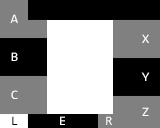
<style>
.page{position:relative;width:160px;height:128px;background:#000000}
.page>*{position:absolute;margin:0}
.t1{font:13px "Consolas";color:#ffffff;scale:1.05 1}
.t2{font:13px "Consolas";color:#000000;scale:1.05 1}
</style>
<div class="page">
<p class="t1" style="left:10px;top:14px;width:8px;height:9px">A</p>
<p class="t1" style="left:142px;top:34px;width:7px;height:9px">X</p>
<p class="t1" style="left:11px;top:52px;width:7px;height:9px">B</p>
<p class="t1" style="left:141px;top:72px;width:9px;height:9px">Y</p>
<p class="t1" style="left:11px;top:90px;width:7px;height:9px">C</p>
<p class="t1" style="left:142px;top:107px;width:7px;height:9px">Z</p>
<p class="t2" style="left:12px;top:116px;width:6px;height:9px">L</p>
<p class="t1" style="left:60px;top:116px;width:5px;height:9px">E</p>
<p class="t1" style="left:106px;top:116px;width:6px;height:9px">R</p>
</div>
